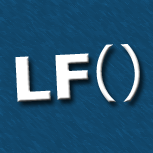
<style>
.page{position:relative;width:153px;height:153px}
.page>*{position:absolute;margin:0}
.t1{font:60px "Verdana-Bold";color:#ffffff;font-weight:bold}
.t2{font:60px "Verdana";color:#ffffff}
</style>
<div class="page">
<p class="t1" style="left:15px;top:44px;width:125px;height:59px;rotate:-3deg">LF<span class="t2">()</span></p>
</div>
